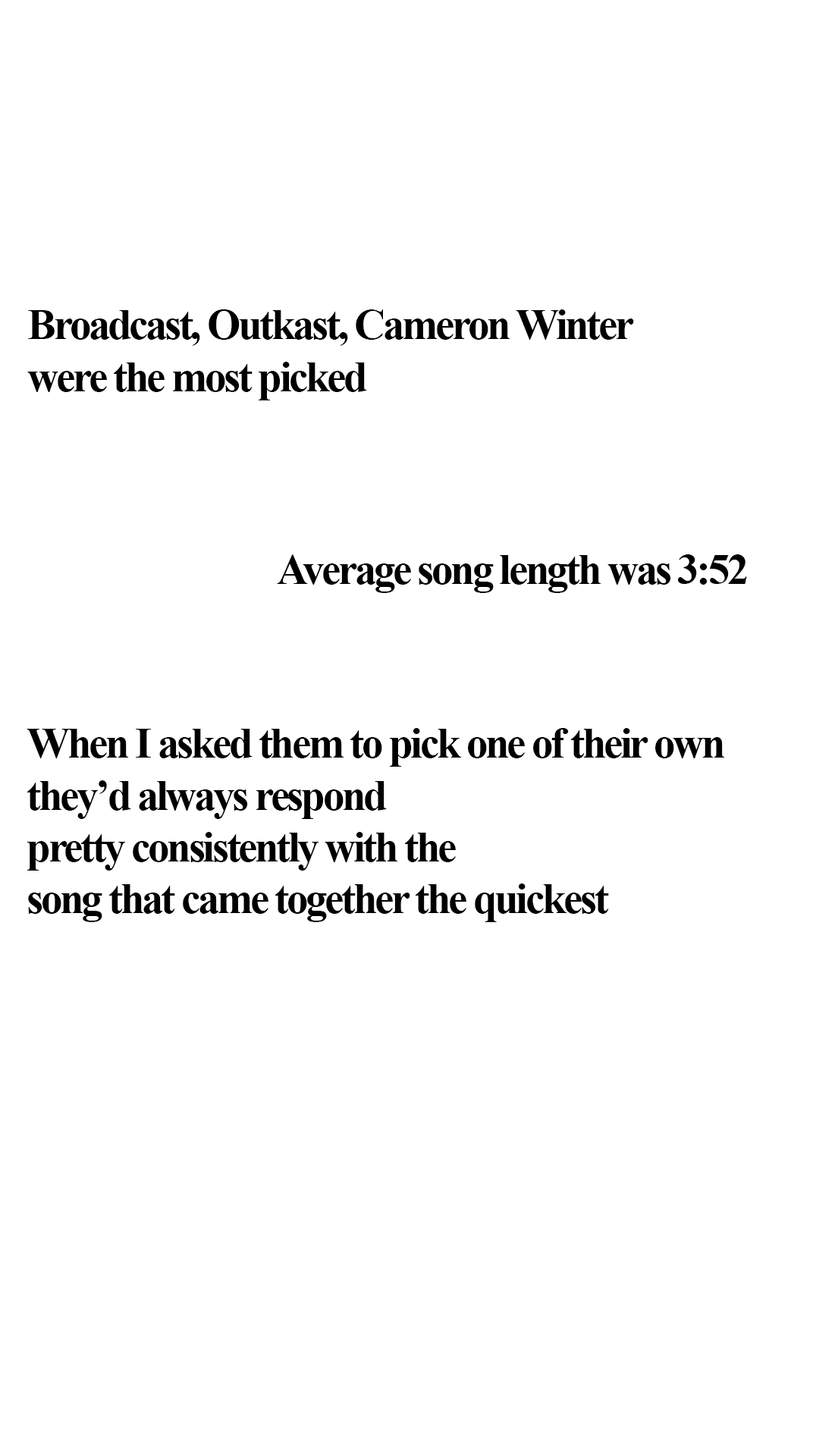
<style>
.page{position:relative;width:819px;height:1456px;background:#ffffff}
.page>*{position:absolute;margin:0}
.t1{font:43.2px "TimesNewRomanPS-BoldMT";letter-spacing:-0.06em;color:#000000}
</style>
<div class="page">
<p class="t1" style="left:27px;top:309px;width:607px;height:91px">Broadcast, Outkast, Cameron Winter<br>were the most picked</p>
<p class="t1" style="left:277px;top:554px;width:470px;height:39px">Average song length was 3:52</p>
<p class="t1" style="left:27px;top:728px;width:697px;height:194px">When I asked them to pick one of their own<br>they’d always respond<br>pretty consistently with the<br>song that came together the quickest</p>
</div>
